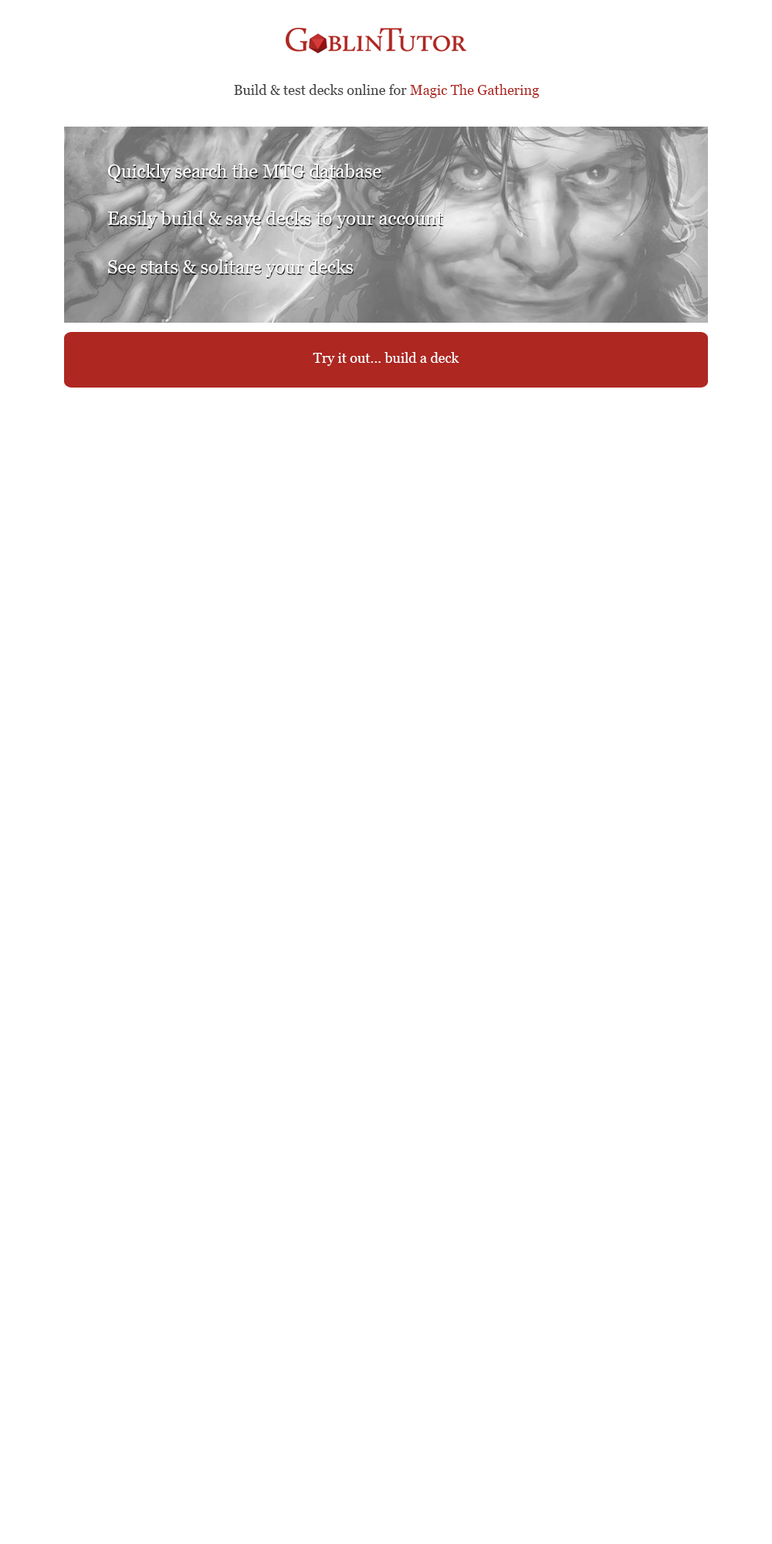
<style>
.page{position:relative;width:772px;height:1544px;background:#ffffff}
.page>*{position:absolute;margin:0}
.t1{font:13.9px "Georgia";color:#444444}
.t2{font:13.9px "Georgia";color:#ae2721}
.t3{font:18.5px "Georgia";color:#ffffff}
.t4{font:13.9px "Georgia";color:#ffffff}
</style>
<div class="page">
<p class="t1" style="left:234px;top:84px;width:306px;height:14px">Build &amp; test decks online for <span class="t2">Magic The Gathering</span></p>
<p class="t3" style="left:107px;top:164px;width:274px;height:17px">Quickly search the MTG database</p>
<p class="t3" style="left:108px;top:211px;width:335px;height:18px">Easily build &amp; save decks to your account</p>
<p class="t3" style="left:108px;top:259px;width:245px;height:18px">See stats &amp; solitare your decks</p>
<p class="t4" style="left:313px;top:352px;width:146px;height:14px">Try it out... build a deck</p>
</div>
